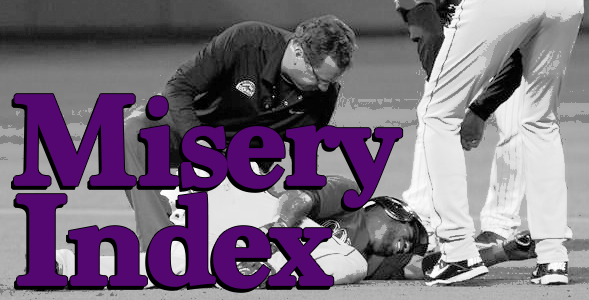
<style>
.page{position:relative;width:589px;height:300px}
.page>*{position:absolute;margin:0}
.t1{font:132px/100px "Marion-Bold";letter-spacing:-0.05em;color:#540770;font-weight:bold}
</style>
<div class="page">
<p class="t1" style="left:14px;top:94px;width:389px;height:195px">Misery<br>Index</p>
</div>
